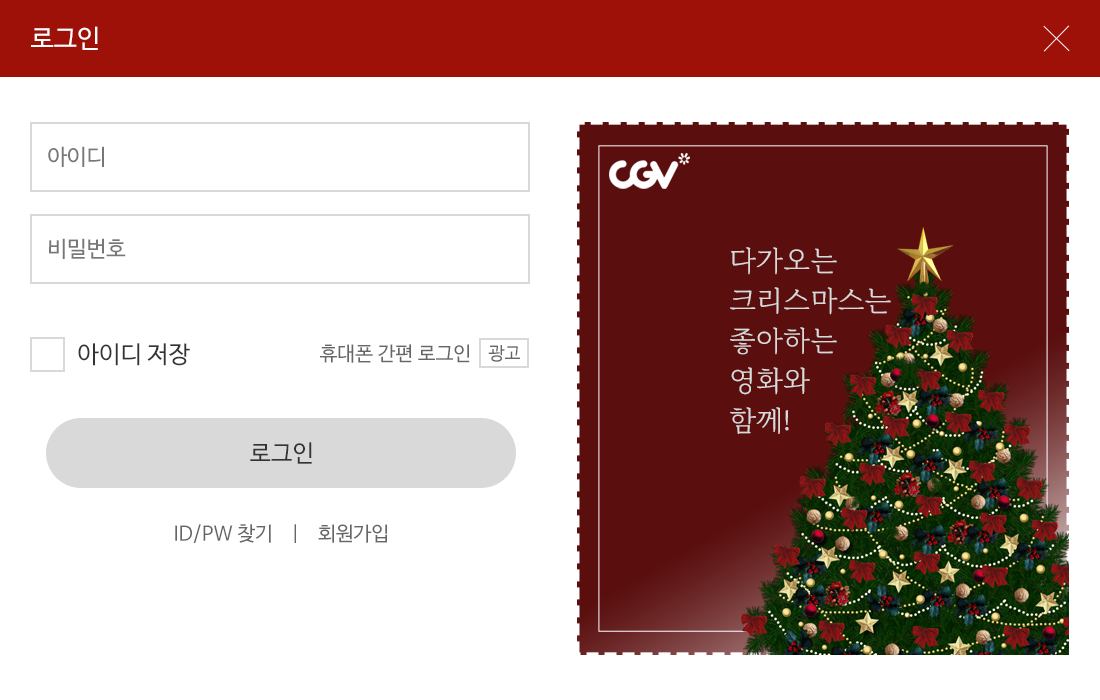
<style>
.page{position:relative;width:1100px;height:700px;background:#ffffff}
.page>*{position:absolute;margin:0}
.t1{font:26px "NanumBarunGothic";color:#fffefe}
.t2{font:22px "NanumBarunGothic";color:#777777}
.t3{font:24px "NanumBarunGothic";color:#333333}
.t4{font:20px "NanumBarunGothic";color:#666666}
.t5{font:18px "NanumBarunGothic";color:#666666}
</style>
<div class="page">
<p class="t1" style="left:31px;top:26px;width:67px;height:24px">로그인</p>
<p class="t2" style="left:48px;top:146px;width:56px;height:21px">아이디</p>
<p class="t2" style="left:49px;top:238px;width:77px;height:21px">비밀번호</p>
<p class="t3" style="left:78px;top:343px;width:112px;height:23px">아이디 저장</p>
<p class="t4" style="left:320px;top:344px;width:150px;height:19px">휴대폰 간편 로그인</p>
<p class="t5" style="left:488px;top:345px;width:32px;height:17px">광고</p>
<p class="t3" style="left:250px;top:442px;width:62px;height:22px">로그인</p>
<p class="t4" style="left:175px;top:524px;width:212px;height:19px">ID/PW 찾기    |    회원가입</p>
</div>
